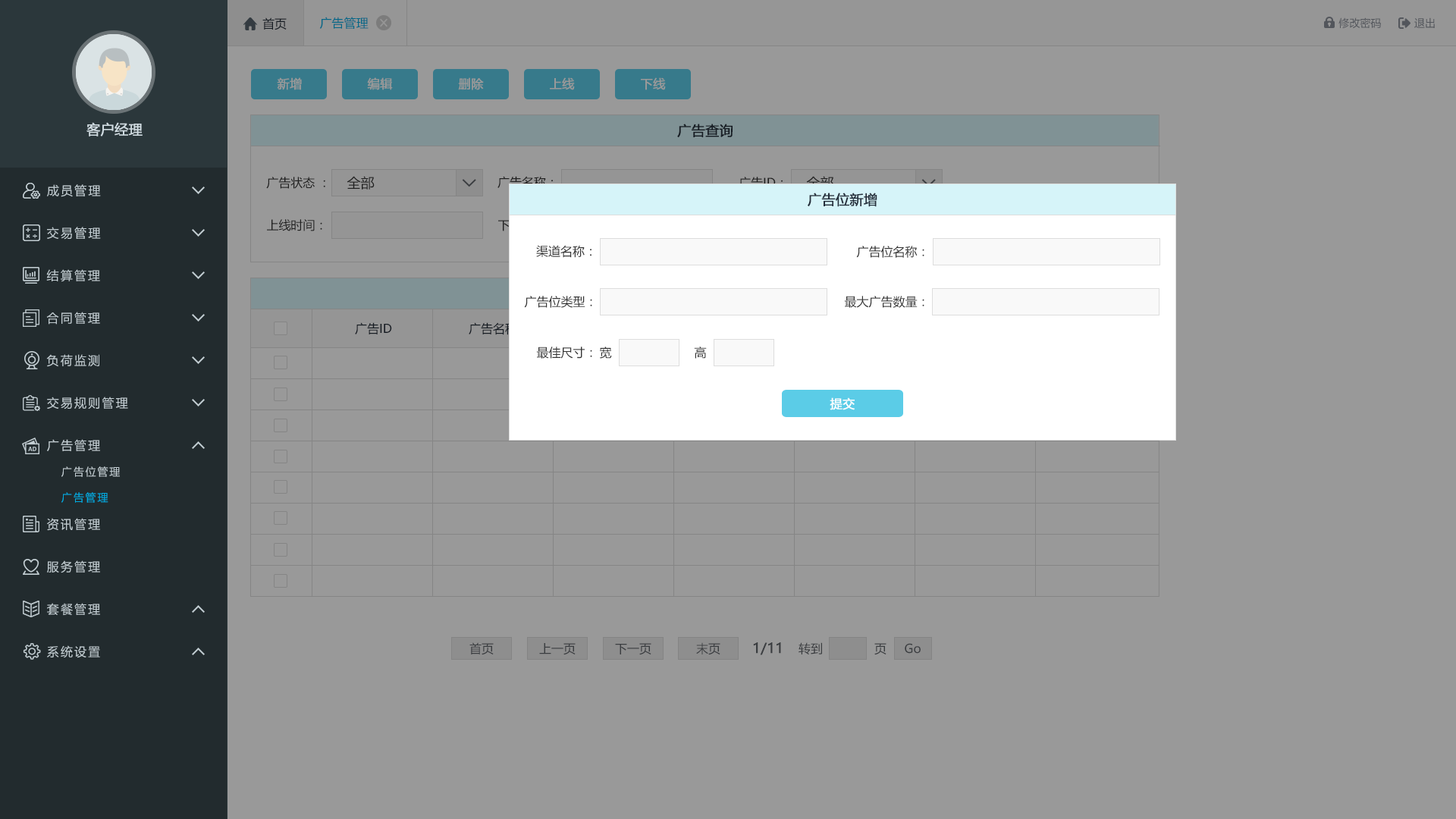
<style>
.page{position:relative;width:1456px;height:819px;background:#999999}
.page>*{position:absolute;margin:0}
.t1{font:12.1px "MicrosoftYaHei";color:#242e3b}
.t2{font:12.1px "MicrosoftYaHei";color:#006788}
.t3{font:10.6px "MicrosoftYaHei";color:#53565c}
.t4{font:12.1px "MicrosoftYaHei";color:#999999;font-weight:bold}
.t5{font:13.6px "MicrosoftYaHei";color:#d1dce2;font-weight:bold}
.t6{font:13.6px "MicrosoftYaHei";color:#242e3b;font-weight:bold}
.t7{font:12.1px "MicrosoftYaHei";letter-spacing:0.14em;color:#c2cdd2}
.t8{font:12.1px "MicrosoftYaHei";color:#333333}
.t9{font:13.6px "MicrosoftYaHei";color:#333333}
.t10{font:13.6px "MicrosoftYaHei"}
.t11{font:12.1px "MicrosoftYaHei";color:#ffffff;font-weight:bold}
.t12{font:10.6px "MicrosoftYaHei";letter-spacing:0.14em;color:#c2cdd2}
.t13{font:10.6px "MicrosoftYaHei";letter-spacing:0.14em;color:#00ace2}
.t14{font:12.1px "MicrosoftYaHei";color:#3a3d40}
.t15{font:13.6px "MicrosoftYaHei";color:#3a3d40;font-weight:bold}
</style>
<div class="page">
<p class="t1" style="left:262px;top:17px;width:25px;height:13px">首页</p>
<p class="t2" style="left:319px;top:17px;width:50px;height:12px">广告管理</p>
<p class="t3" style="left:1338px;top:17px;width:43px;height:12px">修改密码</p>
<p class="t3" style="left:1414px;top:17px;width:21px;height:11px">退出</p>
<p class="t4" style="left:277px;top:77px;width:25px;height:13px">新增</p>
<p class="t4" style="left:367px;top:77px;width:26px;height:13px">编辑</p>
<p class="t4" style="left:458px;top:77px;width:26px;height:13px">删除</p>
<p class="t4" style="left:550px;top:77px;width:25px;height:13px">上线</p>
<p class="t4" style="left:641px;top:77px;width:25px;height:13px">下线</p>
<p class="t5" style="left:86px;top:122px;width:57px;height:14px">客户经理</p>
<p class="t6" style="left:677px;top:124px;width:56px;height:13px">广告查询</p>
<p class="t7" style="left:47px;top:184px;width:54px;height:13px">成员管理</p>
<p class="t8" style="left:266px;top:177px;width:59px;height:12px">广告状态 ：</p>
<p class="t9" style="left:347px;top:176px;width:28px;height:14px">全部</p>
<p class="t8" style="left:497px;top:176px;width:56px;height:13px">广告名称：</p>
<p class="t8" style="left:739px;top:177px;width:44px;height:12px">广告ID：</p>
<p class="t10" style="left:806px;top:176px;width:28px;height:14px">全部</p>
<p class="t6" style="left:808px;top:193px;width:69px;height:14px">广告位新增</p>
<p class="t8" style="left:267px;top:219px;width:55px;height:12px">上线时间：</p>
<p class="t7" style="left:47px;top:227px;width:54px;height:13px">交易管理</p>
<p class="t8" style="left:536px;top:245px;width:55px;height:13px">渠道名称：</p>
<p class="t8" style="left:856px;top:246px;width:68px;height:12px">广告位名称：</p>
<p class="t7" style="left:46px;top:269px;width:54px;height:13px">结算管理</p>
<p class="t8" style="left:524px;top:296px;width:68px;height:12px">广告位类型：</p>
<p class="t8" style="left:844px;top:296px;width:80px;height:12px">最大广告数量：</p>
<p class="t7" style="left:46px;top:312px;width:54px;height:13px">合同管理</p>
<p class="t1" style="left:355px;top:322px;width:37px;height:12px">广告ID</p>
<p class="t1" style="left:469px;top:322px;width:48px;height:13px">广告名称</p>
<p class="t8" style="left:536px;top:347px;width:56px;height:12px">最佳尺寸：</p>
<p class="t8" style="left:600px;top:347px;width:12px;height:12px">宽</p>
<p class="t8" style="left:694px;top:347px;width:13px;height:12px">高</p>
<p class="t7" style="left:46px;top:354px;width:53px;height:13px">负荷监测</p>
<p class="t7" style="left:47px;top:397px;width:81px;height:12px">交易规则管理</p>
<p class="t11" style="left:830px;top:397px;width:25px;height:13px">提交</p>
<p class="t7" style="left:47px;top:439px;width:53px;height:12px">广告管理</p>
<p class="t12" style="left:61px;top:466px;width:59px;height:11px">广告位管理</p>
<p class="t13" style="left:61px;top:492px;width:47px;height:11px">广告管理</p>
<p class="t7" style="left:47px;top:518px;width:53px;height:13px">资讯管理</p>
<p class="t7" style="left:47px;top:560px;width:53px;height:13px">服务管理</p>
<p class="t7" style="left:47px;top:603px;width:53px;height:13px">套餐管理</p>
<p class="t7" style="left:47px;top:645px;width:53px;height:13px">系统设置</p>
<p class="t14" style="left:469px;top:642px;width:25px;height:13px">首页</p>
<p class="t14" style="left:539px;top:643px;width:37px;height:12px">上一页</p>
<p class="t14" style="left:615px;top:643px;width:36px;height:12px">下一页</p>
<p class="t14" style="left:696px;top:642px;width:24px;height:13px">末页</p>
<p class="t15" style="left:753px;top:642px;width:28px;height:13px">1/11</p>
<p class="t14" style="left:799px;top:642px;width:23px;height:12px">转到</p>
<p class="t14" style="left:874px;top:643px;width:12px;height:12px">页</p>
<p class="t14" style="left:905px;top:643px;width:16px;height:11px">Go</p>
</div>
